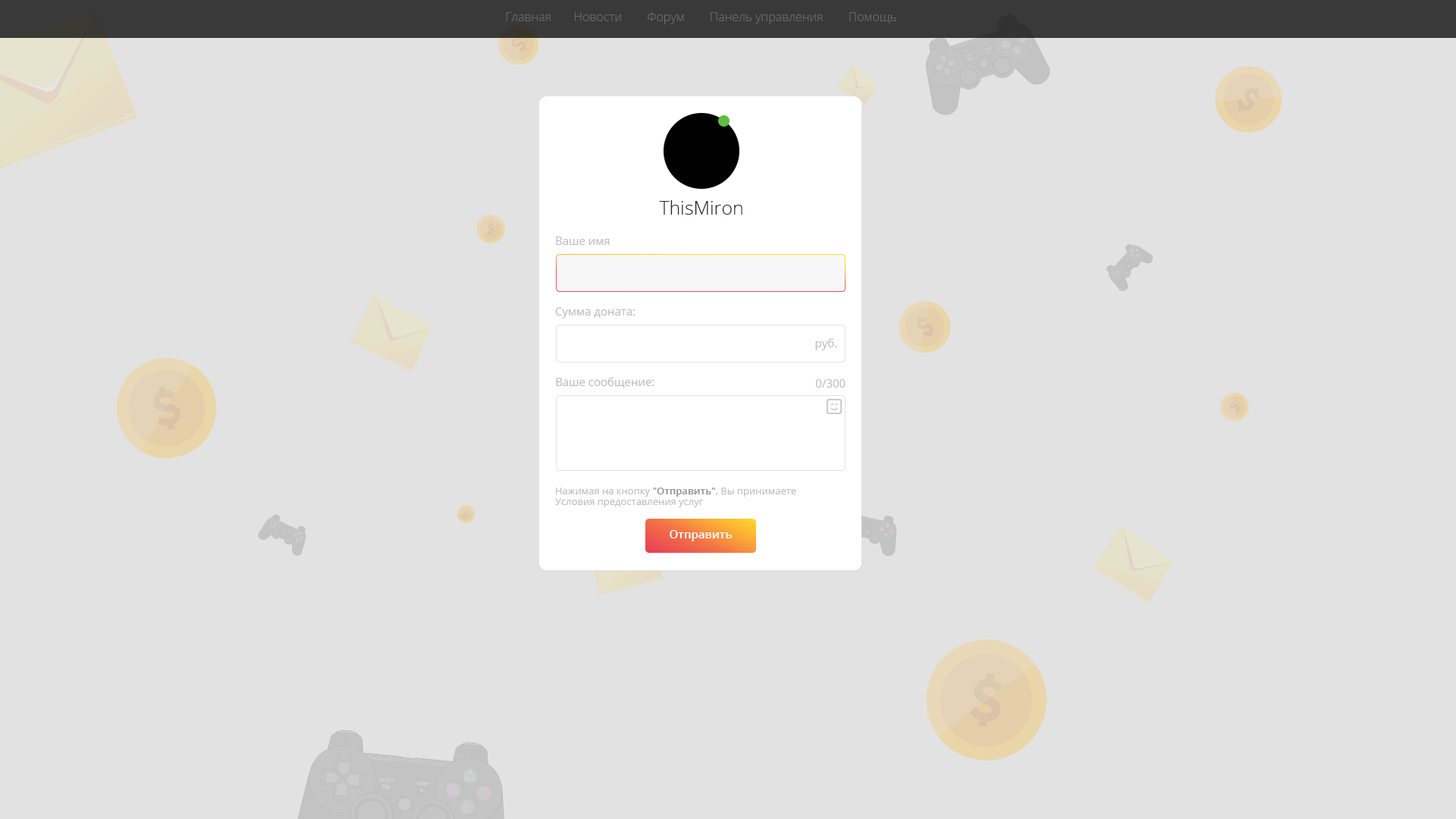
<style>
.page{position:relative;width:1456px;height:819px;background:#e2e2e2}
.page>*{position:absolute;margin:0}
.t1{font:12.1px "OpenSans-Light";color:#696868}
.t2{font:19px "OpenSans-Light";color:#282828}
.t3{font:11.4px "OpenSans";color:#bfbfbf}
.t4{font:11.3px "OpenSans";color:#bfbfbf}
.t5{font:9.9px/10.6px "OpenSans";color:#bfbfbf}
.t6{font:9.9px/10.6px "OpenSans-Semibold";color:#8f8f8f}
.t7{font:11.4px "OpenSans-Semibold";color:#ffffff}
</style>
<div class="page">
<p class="t1" style="left:506px;top:12px;width:390px;height:12px">Главная       Новости        Форум        Панель управления        Помощь</p>
<p class="t2" style="left:659px;top:200px;width:83px;height:15px">ThisMiron</p>
<p class="t3" style="left:556px;top:237px;width:54px;height:8px">Ваше имя</p>
<p class="t4" style="left:555px;top:307px;width:80px;height:11px">Сумма доната:</p>
<p class="t3" style="left:815px;top:338px;width:22px;height:12px">руб.</p>
<p class="t4" style="left:556px;top:377px;width:98px;height:11px">Ваше сообщение:</p>
<p class="t3" style="left:815px;top:379px;width:31px;height:9px">0/300</p>
<p class="t5" style="left:555px;top:488px;width:241px;height:19px">Нажимая на кнопку <span class="t6">"Отправить"</span>, Вы принимаете<br>Условия предоставления услуг</p>
<p class="t7" style="left:670px;top:530px;width:62px;height:11px">Отправить</p>
<p class="t7" style="left:670px;top:530px;width:62px;height:11px">Отправить</p>
</div>
